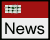
<style>
.page{position:relative;width:50px;height:40px;background:#eeeeee}
.page>*{position:absolute;margin:0}
.t1{font:16px "ArialNarrow";color:#000400;scale:1.25 1}
</style>
<div class="page">
<p class="t1" style="left:5px;top:22px;width:40px;height:13px">News</p>
</div>
